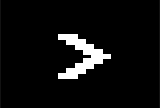
<style>
.page{position:relative;width:160px;height:108px;background:#000000}
.page>*{position:absolute;margin:0}
.t1{font:62.5px "System";letter-spacing:0.05em;color:#ffffff;font-weight:bold;scale:1.68 1}
</style>
<div class="page">
<p class="t1" style="left:58px;top:34px;width:53px;height:45px">&gt;</p>
</div>
